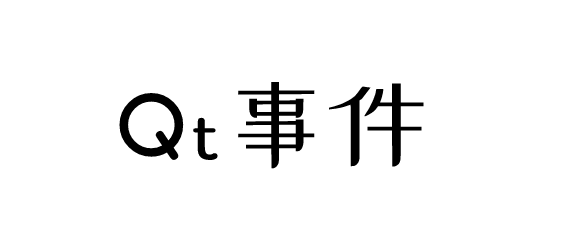
<style>
.page{position:relative;width:580px;height:247px;background:#ffffff}
.page>*{position:absolute;margin:0}
.t1{font:100px "xiaowei";color:#000000}
</style>
<div class="page">
<p class="t1" style="left:119px;top:81px;width:305px;height:88px">Qt事件</p>
</div>
